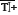
<style>
.page{position:relative;width:18px;height:15px;background:#ffffff}
.page>*{position:absolute;margin:0}
.t1{font:10.4px "KozMinPro-ExtraLight";letter-spacing:-0.03em;color:#191919;font-weight:bold;scale:1.11 1}
.t2{font:10px "KozMinPro-ExtraLight";letter-spacing:-0.03em;color:#191919;font-weight:bold;scale:1.09 1}
</style>
<div class="page">
<p class="t1" style="left:1px;top:3px;width:8px;height:8px">T</p>
<p class="t2" style="left:11px;top:5px;width:6px;height:5px">+</p>
</div>
